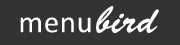
<style>
.page{position:relative;width:180px;height:45px;background:#333333}
.page>*{position:absolute;margin:0}
.t1{font:38.7px "BrushScriptStd";letter-spacing:0.015em;color:#ffffff}
.t2{font:31.1px "Calibri";letter-spacing:0.015em;color:#ffffff}
</style>
<div class="page">
<p class="t1" style="left:96px;top:6px;width:63px;height:27px">bird</p>
<p class="t2" style="left:20px;top:17px;width:71px;height:16px">menu</p>
</div>
